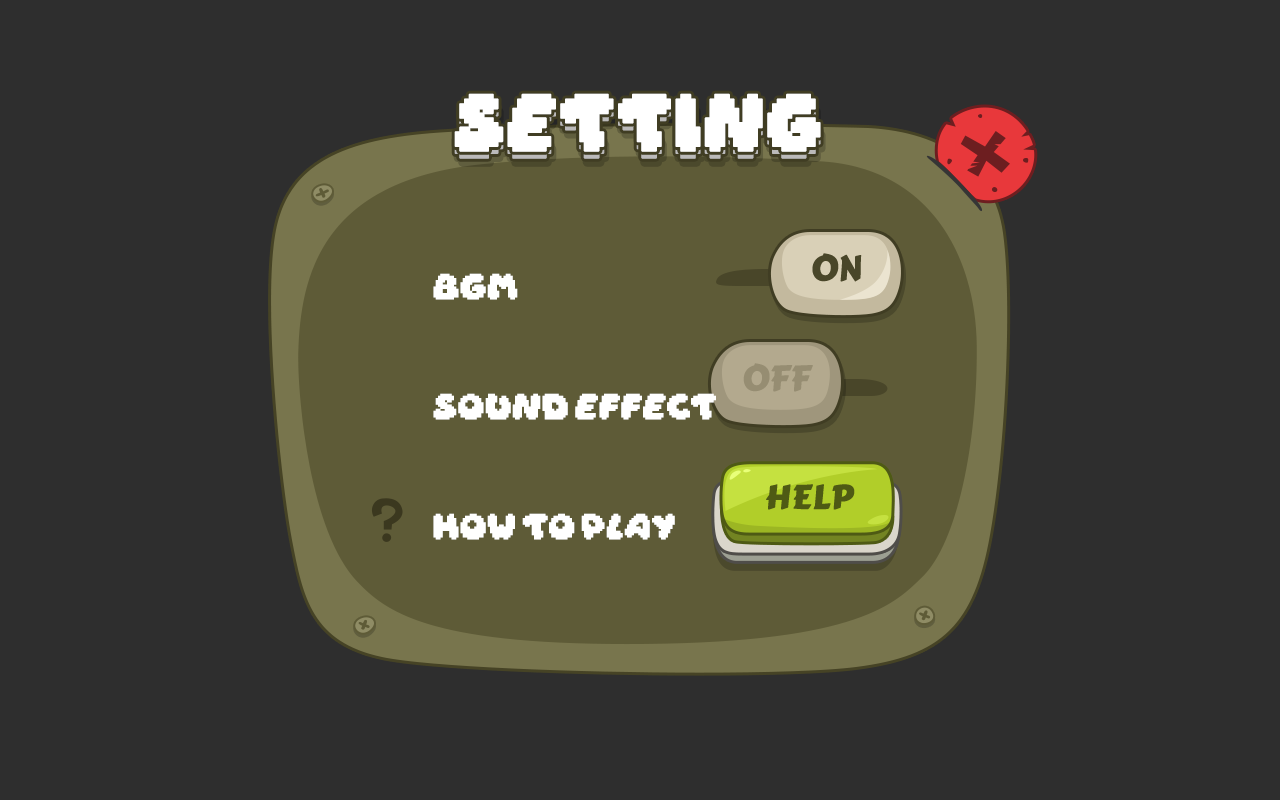
<style>
.page{position:relative;width:1280px;height:800px;background:#2e2e2e}
.page>*{position:absolute;margin:0}
.t1{font:50px "Daydream";color:#ffffff;text-transform:uppercase;font-weight:bold}
.t2{font:35px "CarterOne";color:#494629;text-transform:uppercase}
.t3{font:22.8px/120px "Daydream";letter-spacing:-0.025em;color:#ffffff;scale:1.06 1}
.t4{font:35px "CarterOne";color:#968d72;text-transform:uppercase}
.t5{font:33.2px "CarterOne";letter-spacing:-0.025em;color:#4e5a14;text-transform:uppercase;font-weight:bold;scale:1.05 1}
</style>
<div class="page">
<p class="t1" style="left:454px;top:100px;width:367px;height:59px">SETTING</p>
<p class="t1" style="left:454px;top:93px;width:367px;height:59px">SETTING</p>
<p class="t2" style="left:812px;top:253px;width:50px;height:29px">ON</p>
<p class="t3" style="left:433px;top:273px;width:283px;height:267px">BGM<br>Sound Effect<br>How to Play</p>
<p class="t4" style="left:743px;top:363px;width:70px;height:29px">OFF</p>
<p class="t5" style="left:766px;top:484px;width:89px;height:26px">HELP</p>
</div>
